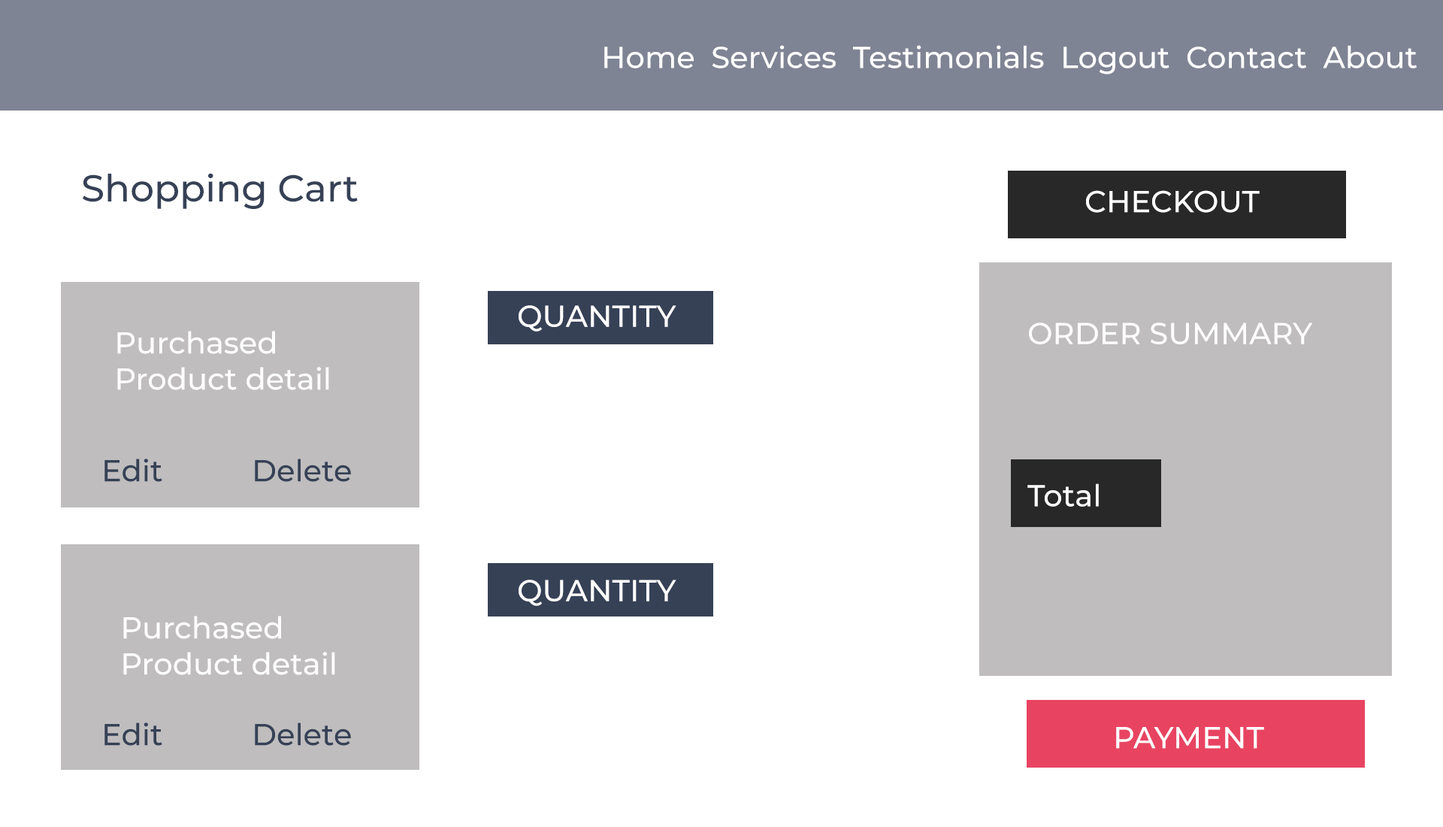
<style>
.page{position:relative;width:1443px;height:827px;background:#ffffff}
.page>*{position:absolute;margin:0}
.t1{font:30.1px "Montserrat-Medium";color:#ffffff}
.t2{font:37.6px "Montserrat-Medium";color:#364156}
.t3{font:30.1px "Montserrat-Medium";color:#364156}
</style>
<div class="page">
<p class="t1" style="left:604px;top:45px;width:812px;height:29px">Home  Services  Testimonials  Logout  Contact  About</p>
<p class="t2" style="left:83px;top:173px;width:275px;height:36px">Shopping Cart</p>
<p class="t1" style="left:1086px;top:190px;width:173px;height:23px">CHECKOUT</p>
<p class="t1" style="left:518px;top:305px;width:158px;height:26px">QUANTITY</p>
<p class="t1" style="left:1029px;top:322px;width:284px;height:22px">ORDER SUMMARY</p>
<p class="t1" style="left:117px;top:331px;width:212px;height:59px">Purchased<br>Product detail</p>
<p class="t3" style="left:104px;top:458px;width:247px;height:24px">Edit           Delete</p>
<p class="t1" style="left:1027px;top:483px;width:72px;height:23px">Total</p>
<p class="t1" style="left:518px;top:579px;width:158px;height:27px">QUANTITY</p>
<p class="t1" style="left:123px;top:615px;width:212px;height:60px">Purchased<br>Product detail</p>
<p class="t3" style="left:104px;top:722px;width:247px;height:23px">Edit           Delete</p>
<p class="t1" style="left:1116px;top:727px;width:148px;height:21px">PAYMENT</p>
</div>
